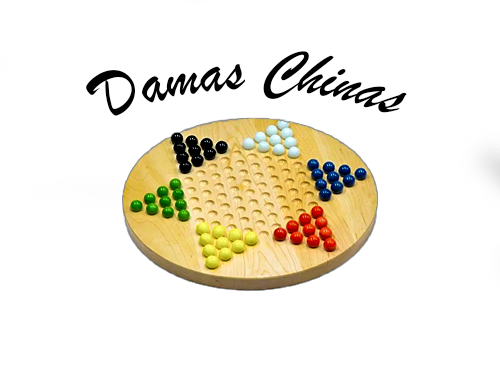
<style>
.page{position:relative;width:500px;height:385px;background:#ffffff}
.page>*{position:absolute;margin:0}
.t1{font:50px "BrushScriptMT";color:#010101}
</style>
<div class="page">
<p class="t1" style="left:86px;top:51px;width:321px;height:65px">Damas Chinas</p>
</div>
